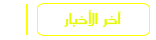
<style>
.page{position:relative;width:156px;height:40px;background:#ffffff}
.page>*{position:absolute;margin:0}
.t1{font:18px "SC_KHALID";color:#e5fa00}
</style>
<div class="page">
<p class="t1" style="left:64px;top:9px;width:57px;height:18px">آخر   الأخبار</p>
</div>
